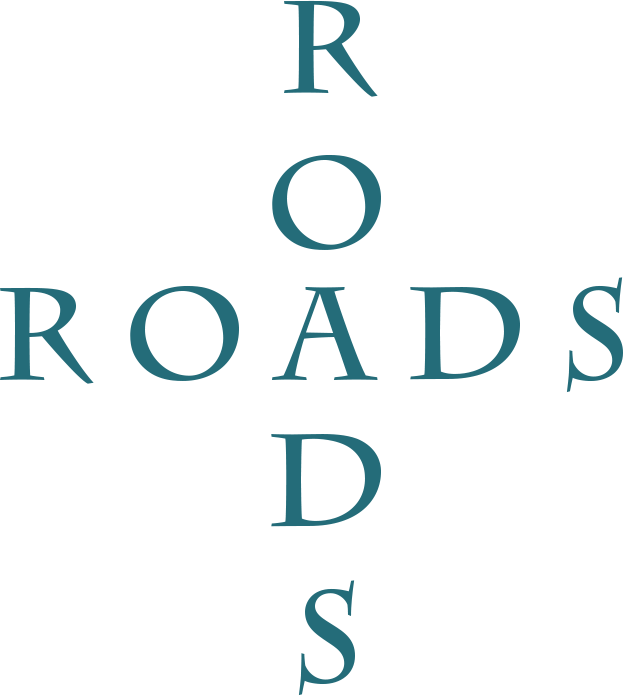
<style>
.page{position:relative;width:623px;height:696px;background:#ffffff}
.page>*{position:absolute;margin:0}
.t1{font:130px "CharlemagneStd-Bold";color:#246c79}
</style>
<div class="page">
<p class="t1" style="left:272px;top:0px;width:109px;height:250px;text-align:center">r<br>o</p>
<p class="t1" style="left:0px;top:277px;width:623px;height:116px">R O A D S</p>
<p class="t1" style="left:271px;top:434px;width:110px;height:262px;text-align:center">d<br>s</p>
</div>
